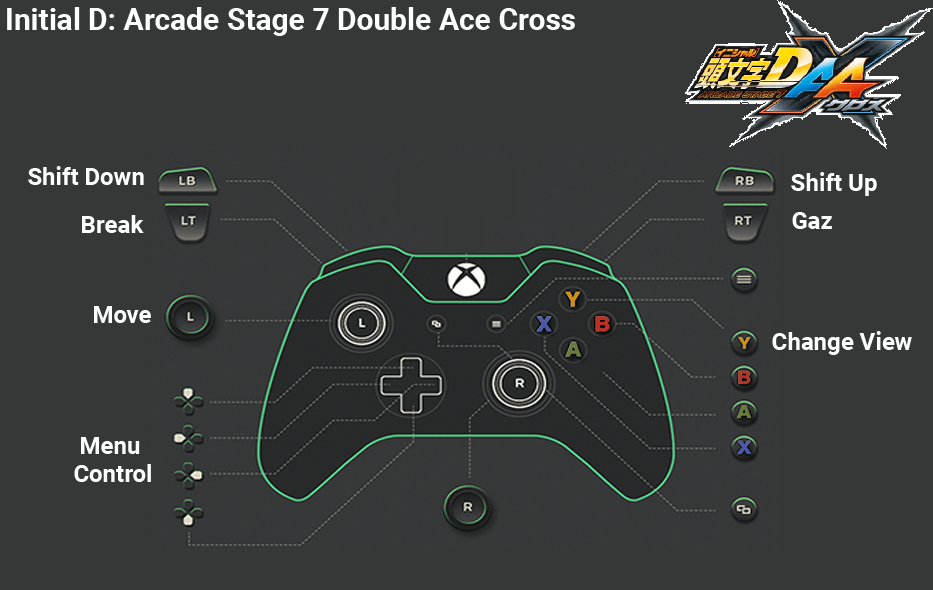
<style>
.page{position:relative;width:933px;height:590px;background:#363838}
.page>*{position:absolute;margin:0}
.t1{font:30px "Roboto-Bold";color:#ffffff}
.t2{font:24px "Roboto-Bold";color:#ffffff}
.t3{font:24px/28px "Roboto-Bold";color:#ffffff}
</style>
<div class="page">
<p class="t1" style="left:7px;top:7px;width:568px;height:29px">Initial D: Arcade Stage 7 Double Ace Cross</p>
<p class="t2" style="left:28px;top:166px;width:116px;height:19px">Shift Down</p>
<p class="t2" style="left:791px;top:172px;width:86px;height:24px">Shift Up</p>
<p class="t2" style="left:82px;top:215px;width:62px;height:18px">Break</p>
<p class="t2" style="left:792px;top:212px;width:40px;height:17px">Gaz</p>
<p class="t2" style="left:94px;top:306px;width:57px;height:17px">Move</p>
<p class="t2" style="left:772px;top:331px;width:140px;height:24px">Change View</p>
<p class="t3" style="left:74px;top:437px;width:77px;height:45px;text-align:center">Menu <br>Control</p>
</div>
